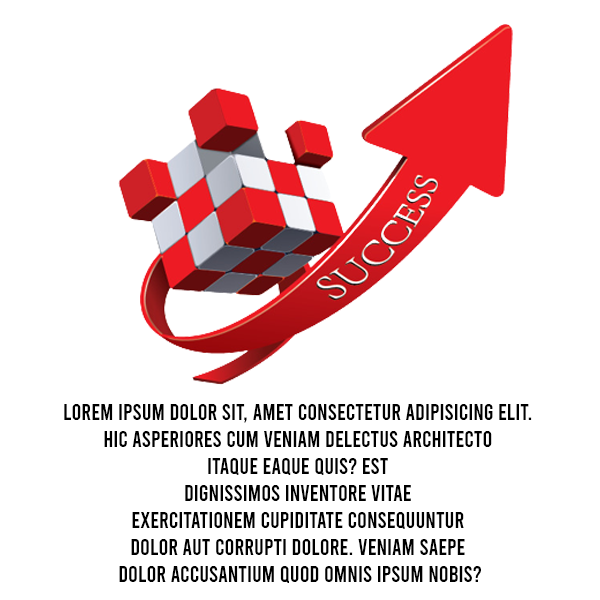
<style>
.page{position:relative;width:600px;height:600px;background:#ffffff}
.page>*{position:absolute;margin:0}
.t1{font:22.5px "Bebas-Regular";color:#000000}
</style>
<div class="page">
<p class="t1" style="left:64px;top:404px;width:468px;height:179px;text-align:center">Lorem ipsum dolor sit, amet consectetur adipisicing elit. <br>Hic asperiores cum veniam delectus architecto <br>itaque eaque quis? Est <br>dignissimos inventore vitae <br>exercitationem cupiditate consequuntur <br>dolor aut corrupti dolore. Veniam saepe <br>dolor accusantium quod omnis ipsum nobis?</p>
</div>
